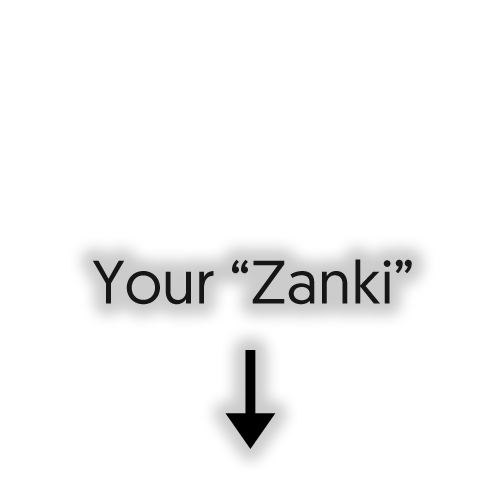
<style>
.page{position:relative;width:500px;height:500px;background:#ffffff}
.page>*{position:absolute;margin:0}
.t1{font:61px "Geomanist-Regular";color:#161616}
</style>
<div class="page">
<p class="t1" style="left:92px;top:259px;width:320px;height:46px">Your “Zanki”</p>
</div>
